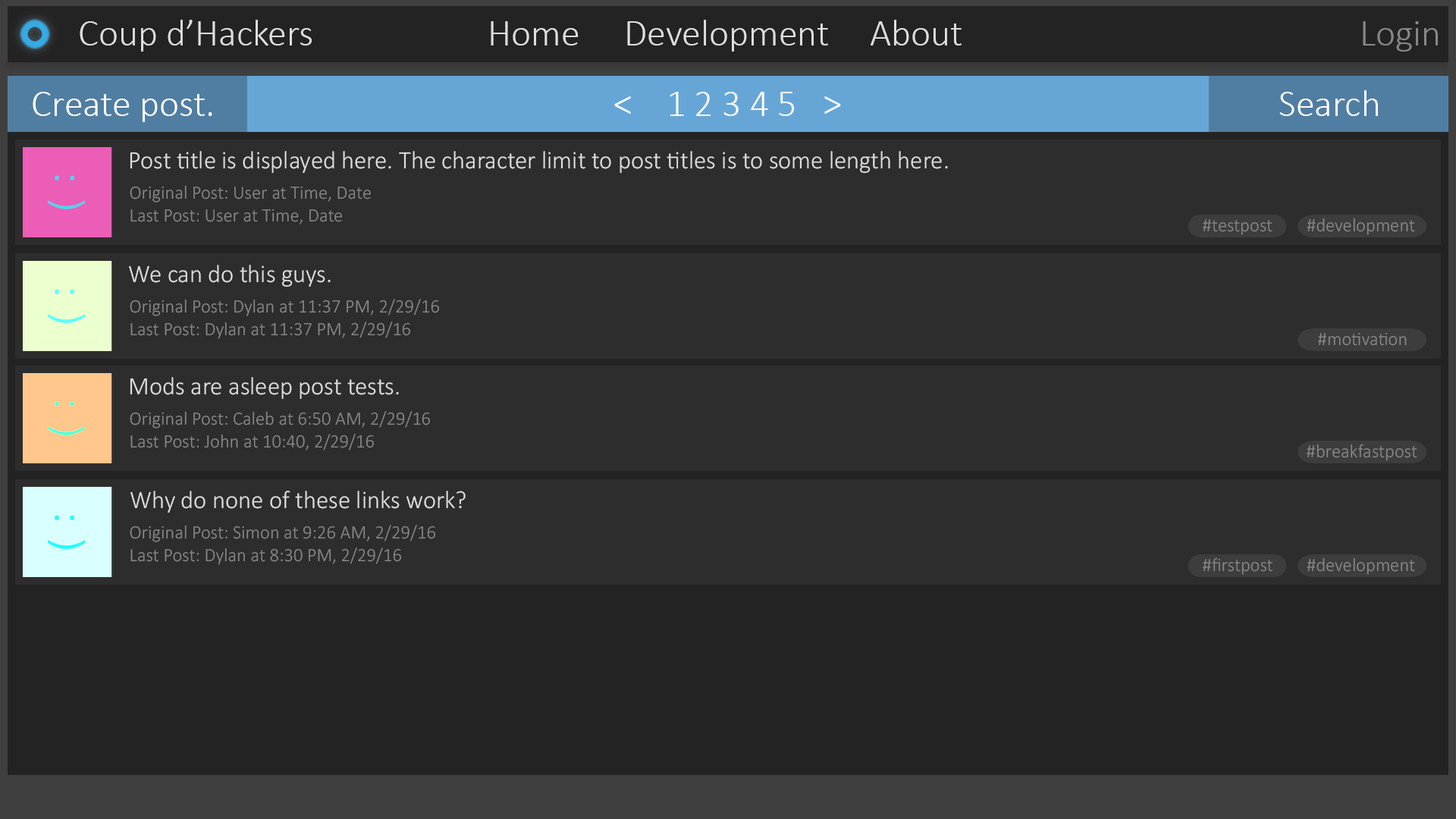
<style>
.page{position:relative;width:1456px;height:819px;background:#2e2d2d}
.page>*{position:absolute;margin:0}
.t1{font:37.9px "Calibri-Light";color:#dedede}
.t2{font:37.9px "Calibri-Light";color:#888888}
.t3{font:37.9px "Calibri-Light";color:#ffffff}
.t4{font:25.3px "Calibri-Light";color:#dedede}
.t5{font:19px "Calibri-Light";color:#888888}
</style>
<div class="page">
<p class="t1" style="left:80px;top:20px;width:1358px;height:32px">Coup d’Hackers       Home   Development  About                 <span class="t2">Login</span></p>
<p class="t3" style="left:33px;top:90px;width:1345px;height:32px">Create post.                   &lt;    1 2 3 4 5   &gt;                 Search</p>
<p class="t4" style="left:130px;top:151px;width:818px;height:23px">Post title is displayed here. The character limit to post titles is to some length here.</p>
<p class="t5" style="left:130px;top:185px;width:241px;height:39px">Original Post: User at Time, Date<br> Last Post: User at Time, Date</p>
<p class="t5" style="left:1203px;top:218px;width:212px;height:17px">#testpost  #development</p>
<p class="t4" style="left:129px;top:265px;width:202px;height:22px">We can do this guys.</p>
<p class="t5" style="left:130px;top:299px;width:309px;height:40px">Original Post: Dylan at 11:37 PM, 2/29/16<br> Last Post: Dylan at 11:37 PM, 2/29/16</p>
<p class="t5" style="left:1318px;top:332px;width:89px;height:14px">#motivation</p>
<p class="t4" style="left:130px;top:377px;width:269px;height:23px">Mods are asleep post tests.</p>
<p class="t5" style="left:130px;top:411px;width:300px;height:39px">Original Post: Caleb at 6:50 AM, 2/29/16<br> Last Post: John at 10:40, 2/29/16</p>
<p class="t5" style="left:1307px;top:444px;width:110px;height:17px">#breakfastpost</p>
<p class="t4" style="left:130px;top:491px;width:336px;height:22px">Why do none of these links work?</p>
<p class="t5" style="left:130px;top:525px;width:305px;height:40px">Original Post: Simon at 9:26 AM, 2/29/16<br> Last Post: Dylan at 8:30 PM, 2/29/16</p>
<p class="t5" style="left:1203px;top:557px;width:212px;height:18px">#firstpost  #development</p>
</div>
